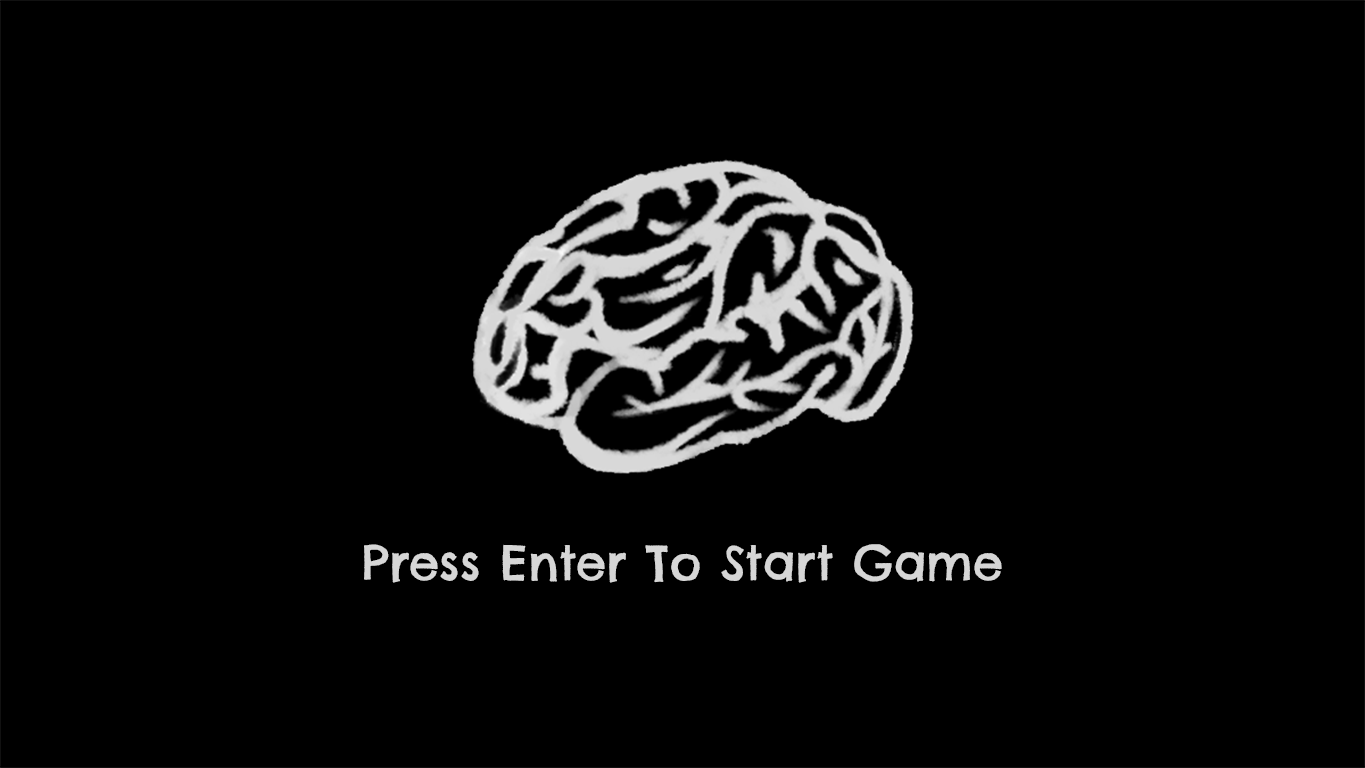
<style>
.page{position:relative;width:1365px;height:768px;background:#000000}
.page>*{position:absolute;margin:0}
.t1{font:48px "ChelseaMarket-Regular";color:#d6d6d6}
</style>
<div class="page">
<p class="t1" style="left:364px;top:544px;width:638px;height:39px">Press Enter To Start Game</p>
</div>
